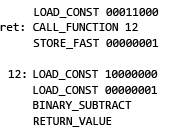
<style>
.page{position:relative;width:175px;height:137px;background:#ffffff}
.page>*{position:absolute;margin:0}
.t1{font:12px "Consolas";color:#000000}
</style>
<div class="page">
<p class="t1" style="left:34px;top:8px;width:125px;height:10px">LOAD_CONST 00011000</p>
<p class="t1" style="left:0px;top:23px;width:138px;height:10px">ret: CALL_FUNCTION 12</p>
<p class="t1" style="left:33px;top:39px;width:125px;height:10px">STORE_FAST 00000001</p>
<p class="t1" style="left:8px;top:70px;width:18px;height:8px">:12</p>
<p class="t1" style="left:33px;top:70px;width:125px;height:10px">LOAD_CONST 10000000</p>
<p class="t1" style="left:33px;top:86px;width:124px;height:10px">LOAD_CONST 00000001</p>
<p class="t1" style="left:33px;top:101px;width:99px;height:10px">BINARY_SUBTRACT</p>
<p class="t1" style="left:33px;top:117px;width:79px;height:10px">RETURN_VALUE</p>
</div>
